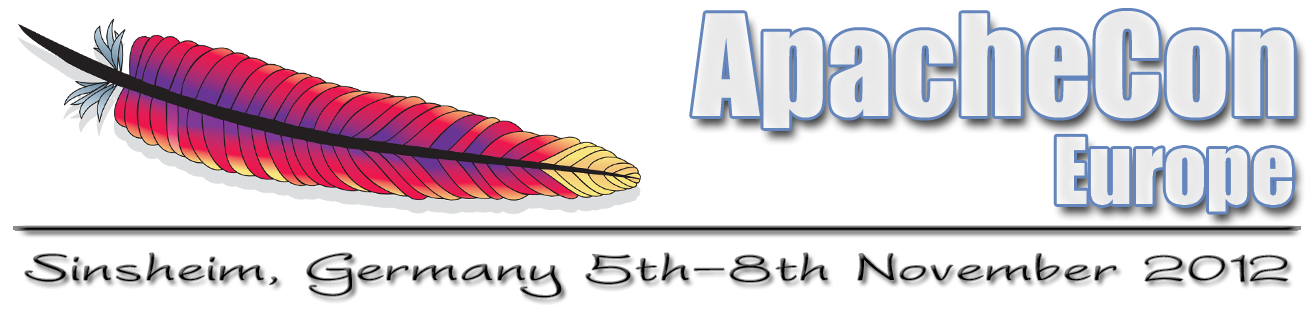
<style>
.page{position:relative;width:1310px;height:310px;background:#ffffff}
.page>*{position:absolute;margin:0}
.t1{font:130px "Impact";color:#ffffff}
.t2{font:85px "Impact";color:#ffffff}
.t3{font:50px "WorstveldSling";color:#000000;scale:1.96 1}
</style>
<div class="page">
<p class="t1" style="left:692px;top:11px;width:602px;height:117px">ApacheCon</p>
<p class="t2" style="left:1056px;top:136px;width:236px;height:76px">Europe</p>
<p class="t3" style="left:25px;top:253px;width:1263px;height:45px">Sinsheim, Germany 5th-8th November 2012</p>
</div>
